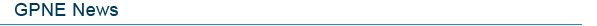
<style>
.page{position:relative;width:597px;height:26px;background:#ffffff}
.page>*{position:absolute;margin:0}
.t1{font:18px "ArialMT";letter-spacing:0.025em;color:#003a5a}
</style>
<div class="page">
<p class="t1" style="left:14px;top:3px;width:104px;height:13px">GPNE News</p>
</div>
